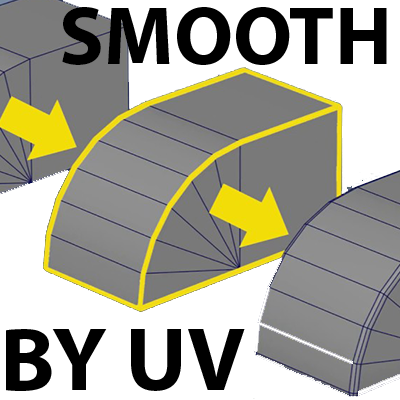
<style>
.page{position:relative;width:400px;height:400px;background:#ffffff}
.page>*{position:absolute;margin:0}
.t1{font:82.4px "MyriadPro-Bold";color:#000000}
.t2{font:91.1px "MyriadPro-Bold";color:#000000}
</style>
<div class="page">
<p class="t1" style="left:62px;top:7px;width:325px;height:58px">SMOOTH</p>
<p class="t2" style="left:6px;top:329px;width:239px;height:62px">BY UV</p>
</div>
